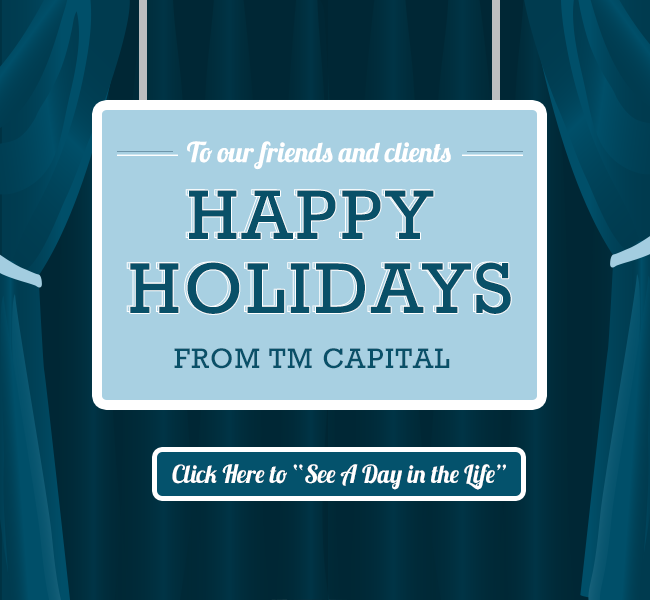
<style>
.page{position:relative;width:650px;height:600px;background:#a8d0e2}
.page>*{position:absolute;margin:0}
.t1{font:27.6px "Lobster1.3";color:#ffffff}
.t2{font:71.2px "Rockwell";letter-spacing:0.05em;color:#095068;text-transform:uppercase}
.t3{font:72.9px "Rockwell";letter-spacing:0.05em;color:#095068;text-transform:uppercase}
.t4{font:28.8px "Rockwell";letter-spacing:0.05em;color:#095068;text-transform:uppercase}
.t5{font:24.9px "Lobster1.3";color:#ffffff}
</style>
<div class="page">
<p class="t1" style="left:187px;top:141px;width:264px;height:29px">To our friends and clients</p>
<p class="t2" style="left:185px;top:189px;width:245px;height:49px">HAPPy</p>
<p class="t2" style="left:189px;top:190px;width:245px;height:49px">HAPPy</p>
<p class="t3" style="left:126px;top:261px;width:382px;height:52px">HOLIDAYS</p>
<p class="t3" style="left:130px;top:262px;width:381px;height:52px">HOLIDAYS</p>
<p class="t4" style="left:174px;top:348px;width:276px;height:21px">From TM Capital</p>
<p class="t5" style="left:172px;top:464px;width:334px;height:26px">Click Here to “See A Day in the Life”</p>
</div>
